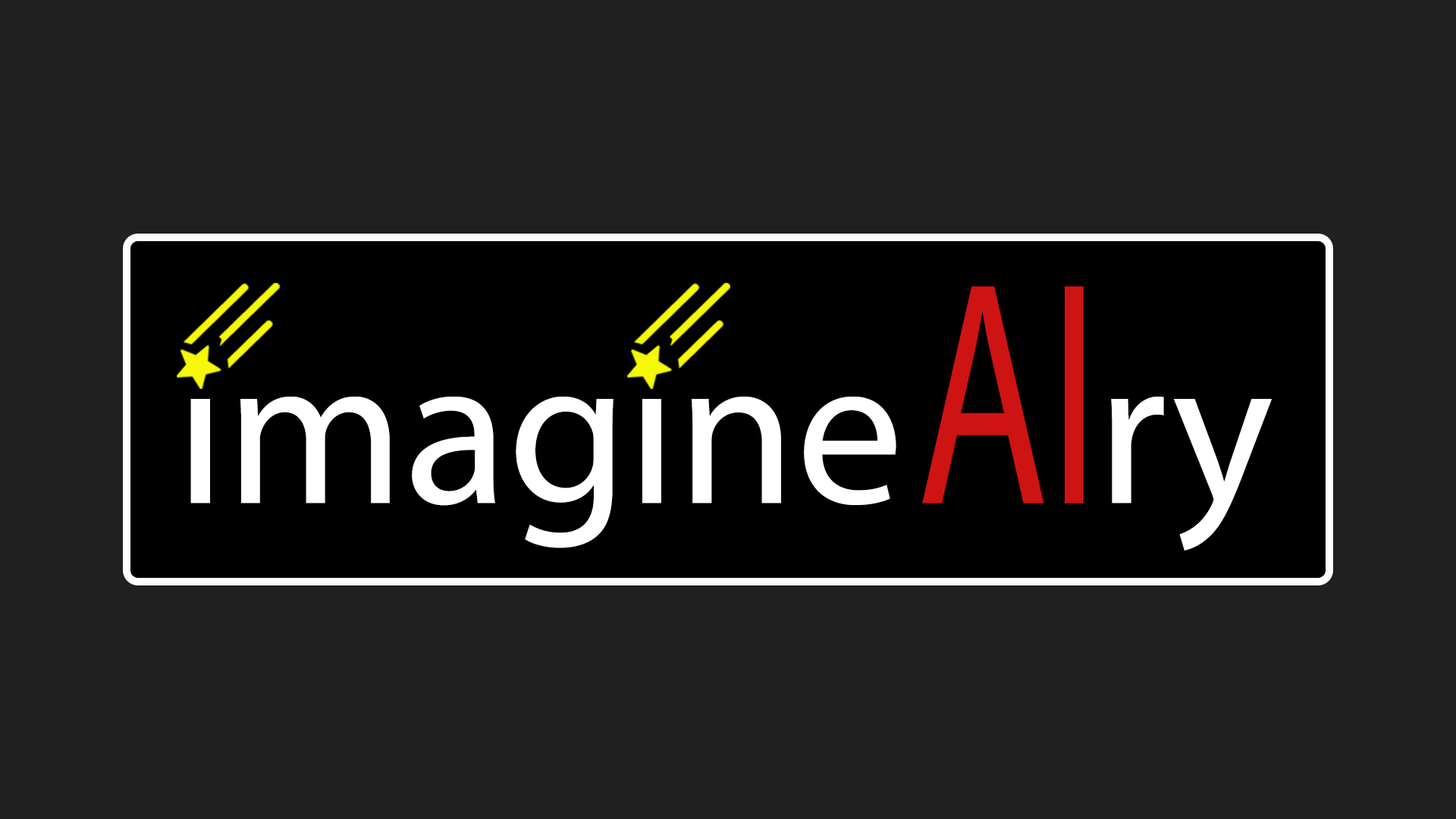
<style>
.page{position:relative;width:1456px;height:819px;background:#212020}
.page>*{position:absolute;margin:0}
.t1{font:321.1px "MyriadPro-Regular";color:#ce1313;scale:0.67 1}
.t2{font:214.6px "MyriadPro-Regular";color:#ffffff}
</style>
<div class="page">
<p class="t1" style="left:922px;top:286px;width:162px;height:218px">AI</p>
<p class="t2" style="left:188px;top:358px;width:1084px;height:193px">imagine   ry</p>
</div>
